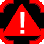
<style>
.page{position:relative;width:44px;height:44px;background:#ff0000}
.page>*{position:absolute;margin:0}
.t1{font:28px "Verdana";color:#ffffff;font-weight:bold}
</style>
<div class="page">
<p class="t1" style="left:20px;top:12px;width:5px;height:22px">!</p>
</div>
